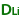
<style>
.page{position:relative;width:20px;height:20px;background:#ffffff}
.page>*{position:absolute;margin:0}
.t1{font:16px "MyriadPro-Semibold";color:#0b7309}
.t2{font:11px "MyriadPro-Semibold";color:#0b7309}
.t3{font:11px "NirmalaUI";color:#0b7309}
</style>
<div class="page">
<p class="t1" style="left:1px;top:4px;width:18px;height:11px">D<span class="t2">L</span><span class="t3">i</span></p>
</div>
